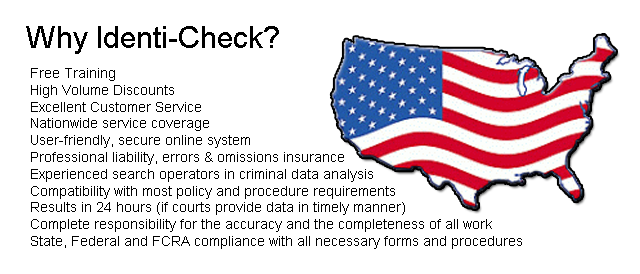
<style>
.page{position:relative;width:640px;height:274px;background:#ffffff}
.page>*{position:absolute;margin:0}
.t1{font:30px "ArialMT";color:#000000}
.t2{font:14px "ArialMT";color:#000000}
</style>
<div class="page">
<p class="t1" style="left:26px;top:26px;width:253px;height:28px">Why Identi-Check?</p>
<p class="t2" style="left:31px;top:68px;width:491px;height:181px">Free Training<br>High Volume Discounts<br>Excellent Customer Service<br>Nationwide service coverage<br>User-friendly, secure online system<br>Professional liability, errors &amp; omissions insurance<br>Experienced search operators in criminal data analysis<br>Compatibility with most policy and procedure requirements<br>Results in 24 hours (if courts provide data in timely manner)<br>Complete responsibility for the accuracy and the completeness of all work<br>State, Federal and FCRA compliance with all necessary forms and procedures</p>
</div>
